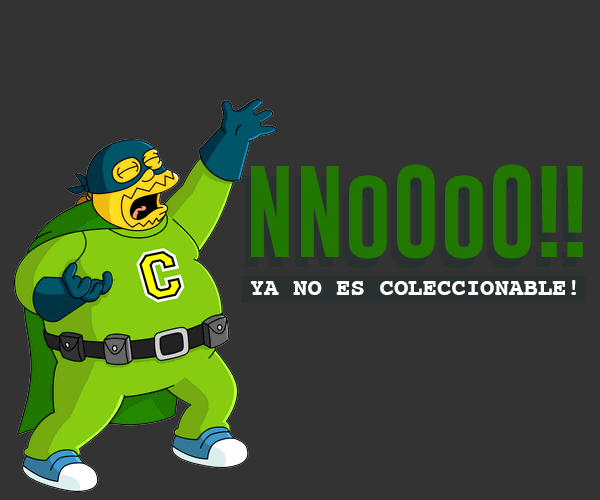
<style>
.page{position:relative;width:600px;height:500px;background:#333333}
.page>*{position:absolute;margin:0}
.t1{font:94.9px "Gobold"}
.t2{font:94.9px "Gobold";color:#227700}
.t3{font:24px "Courier-Bold";color:#ffffff}
</style>
<div class="page">
<p class="t1" style="left:245px;top:174px;width:332px;height:95px">NNoOoO!!</p>
<p class="t2" style="left:251px;top:164px;width:332px;height:95px">NNoOoO!!</p>
<p class="t3" style="left:250px;top:280px;width:326px;height:15px">YA NO ES COLECCIONABLE!</p>
</div>
